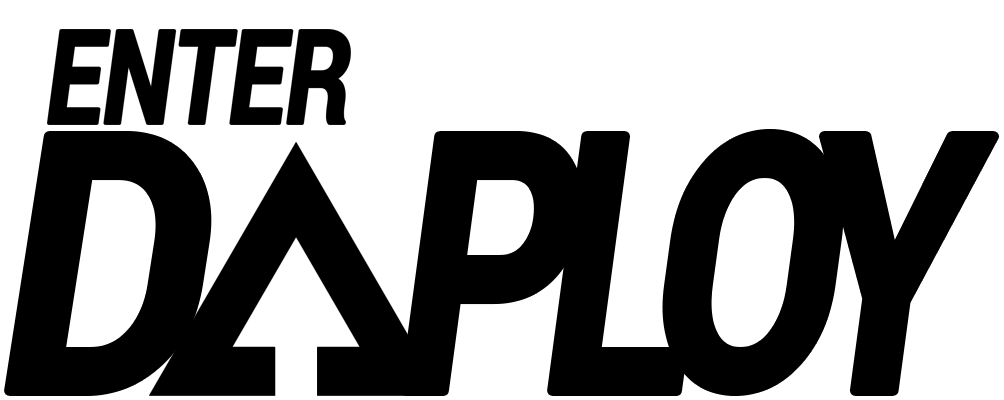
<style>
.page{position:relative;width:1004px;height:400px;background:#ffffff}
.page>*{position:absolute;margin:0}
.t1{font:357.8px "Roboto-Bold";color:#000000;font-style:italic;scale:0.88 1}
.t2{font:357.5px "Roboto-Bold";color:#000000;font-style:italic;scale:0.76 1}
.t3{font:350.7px "Roboto-Bold";color:#000000;font-style:italic;scale:0.77 1}
</style>
<div class="page">
<p class="t1" style="left:9px;top:136px;width:198px;height:255px">D</p>
<p class="t2" style="left:405px;top:136px;width:174px;height:255px">P</p>
<p class="t2" style="left:552px;top:136px;width:131px;height:255px">L</p>
<p class="t3" style="left:667px;top:134px;width:172px;height:257px">O</p>
<p class="t2" style="left:823px;top:136px;width:172px;height:255px">Y</p>
</div>
